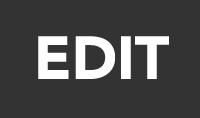
<style>
.page{position:relative;width:200px;height:118px;background:#333333}
.page>*{position:absolute;margin:0}
.t1{font:60px "Avenir-Black";color:#ffffff}
</style>
<div class="page">
<p class="t1" style="left:38px;top:36px;width:131px;height:43px">EDIT</p>
</div>
